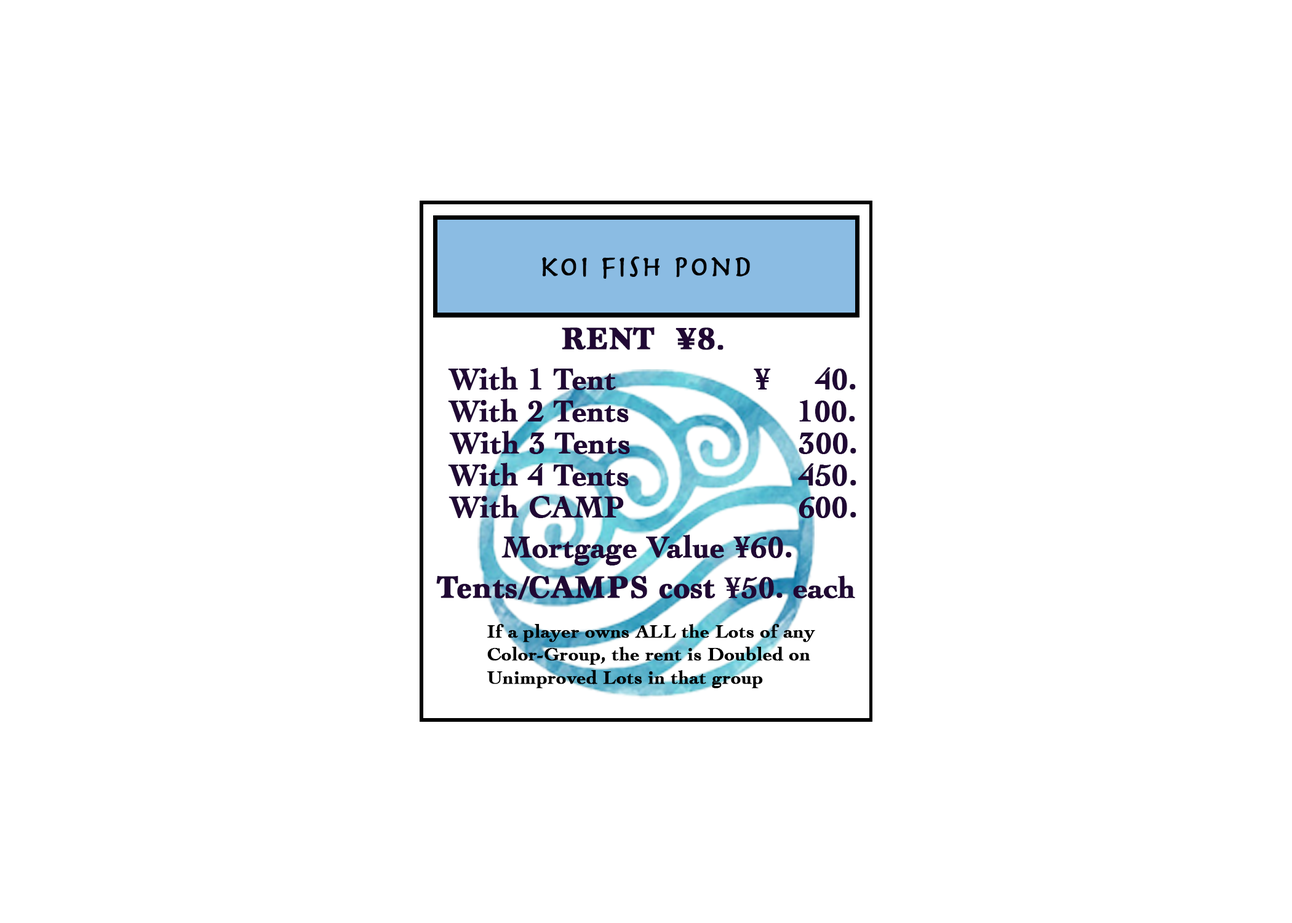
<style>
.page{position:relative;width:1292px;height:923px;background:#ffffff}
.page>*{position:absolute;margin:0}
.t1{font:30.8px "Herculanum";color:#000000;font-weight:bold}
.t2{font:32px "Marion-Bold";color:#200834;font-weight:bold}
.t3{font:30.8px "Cochin-Bold";color:#200834;font-weight:bold}
.t4{font:19.2px "Cochin-Bold";color:#000000;font-weight:bold}
</style>
<div class="page">
<p class="t1" style="left:542px;top:256px;width:208px;height:23px">koi fish pond</p>
<p class="t2" style="left:562px;top:327px;width:162px;height:23px">RENT  ¥8.</p>
<p class="t3" style="left:448px;top:367px;width:408px;height:23px">With 1 Tent               ¥     40.</p>
<p class="t3" style="left:448px;top:399px;width:407px;height:23px">With 2 Tents                   100.</p>
<p class="t3" style="left:449px;top:431px;width:407px;height:23px">With 3 Tents                   300.</p>
<p class="t3" style="left:448px;top:463px;width:408px;height:23px">With 4 Tents                   450.</p>
<p class="t3" style="left:449px;top:495px;width:407px;height:23px">With CAMP                  600.</p>
<p class="t3" style="left:501px;top:535px;width:291px;height:30px">Mortgage Value ¥60.</p>
<p class="t2" style="left:436px;top:575px;width:419px;height:25px">Tents/CAMPS cost <span class="t3">¥50. each</span></p>
<p class="t4" style="left:487px;top:624px;width:328px;height:64px">If a player owns ALL the Lots of any <br>Color-Group, the rent is Doubled on <br>Unimproved Lots in that group</p>
</div>
